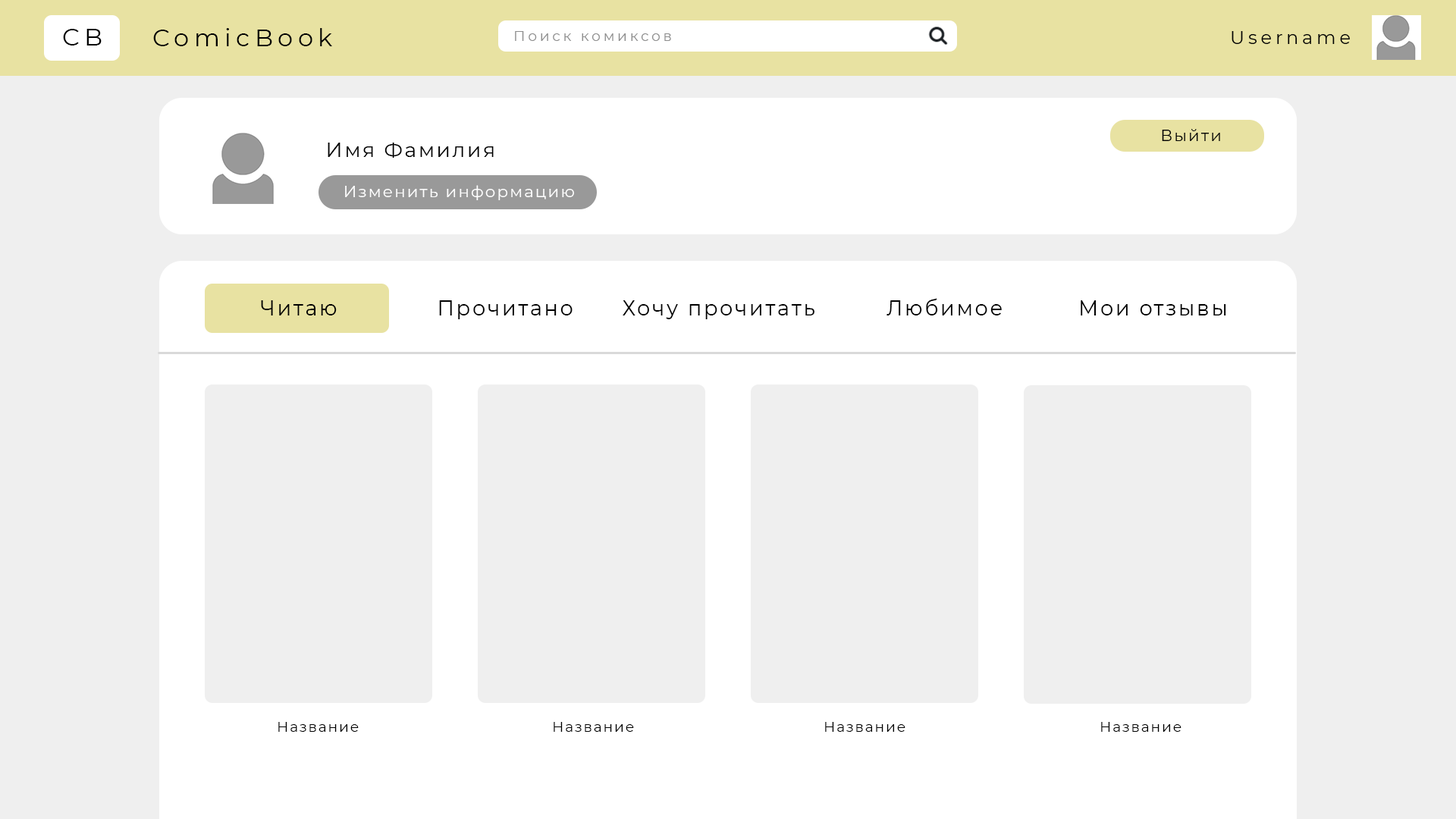
<style>
.page{position:relative;width:1456px;height:819px;background:#efefef}
.page>*{position:absolute;margin:0}
.t1{font:24.3px "Montserrat-Regular";letter-spacing:0.2em;color:#000000}
.t2{font:14.2px "Montserrat-Regular";letter-spacing:0.2em;color:#8d8d8d}
.t3{font:18.2px "Montserrat-Regular";letter-spacing:0.2em;color:#000000}
.t4{font:16.2px "Montserrat-Regular";letter-spacing:0.1em;color:#000000}
.t5{font:20.2px "Montserrat-Regular";letter-spacing:0.1em;color:#000000}
.t6{font:16.2px "Montserrat-Regular";letter-spacing:0.1em;color:#ffffff}
.t7{font:20.6px "Montserrat-Regular";letter-spacing:0.1em;color:#000000}
.t8{font:14.2px "Montserrat-Regular";letter-spacing:0.1em;color:#000000}
</style>
<div class="page">
<p class="t1" style="left:63px;top:29px;width:39px;height:16px">CB</p>
<p class="t1" style="left:153px;top:28px;width:179px;height:18px">ComicBook</p>
<p class="t2" style="left:515px;top:31px;width:156px;height:10px">Поиск комиксов</p>
<p class="t3" style="left:1232px;top:31px;width:118px;height:13px">Username</p>
<p class="t4" style="left:1162px;top:129px;width:58px;height:12px">Выйти</p>
<p class="t5" style="left:328px;top:143px;width:166px;height:15px">Имя Фамилия</p>
<p class="t6" style="left:345px;top:185px;width:229px;height:15px">Изменить информацию</p>
<p class="t7" style="left:261px;top:300px;width:76px;height:15px">Читаю</p>
<p class="t7" style="left:439px;top:300px;width:134px;height:19px">Прочитано</p>
<p class="t7" style="left:623px;top:300px;width:191px;height:19px">Хочу прочитать</p>
<p class="t7" style="left:886px;top:298px;width:116px;height:17px">Любимое</p>
<p class="t7" style="left:1081px;top:300px;width:145px;height:15px">Мои отзывы</p>
<p class="t8" style="left:278px;top:722px;width:81px;height:10px">Название</p>
<p class="t8" style="left:554px;top:722px;width:80px;height:10px">Название</p>
<p class="t8" style="left:825px;top:722px;width:80px;height:10px">Название</p>
<p class="t8" style="left:1101px;top:722px;width:80px;height:10px">Название</p>
</div>
